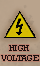
<style>
.page{position:relative;width:40px;height:66px}
.page>*{position:absolute;margin:0}
.t1{font:8px "Rockwell";letter-spacing:-0.06em;color:#1a100f;scale:1.13 1}
</style>
<div class="page">
<p class="t1" style="left:1px;top:45px;width:38px;height:16px;text-align:center">HIGH <br>VOLTAGE</p>
</div>
